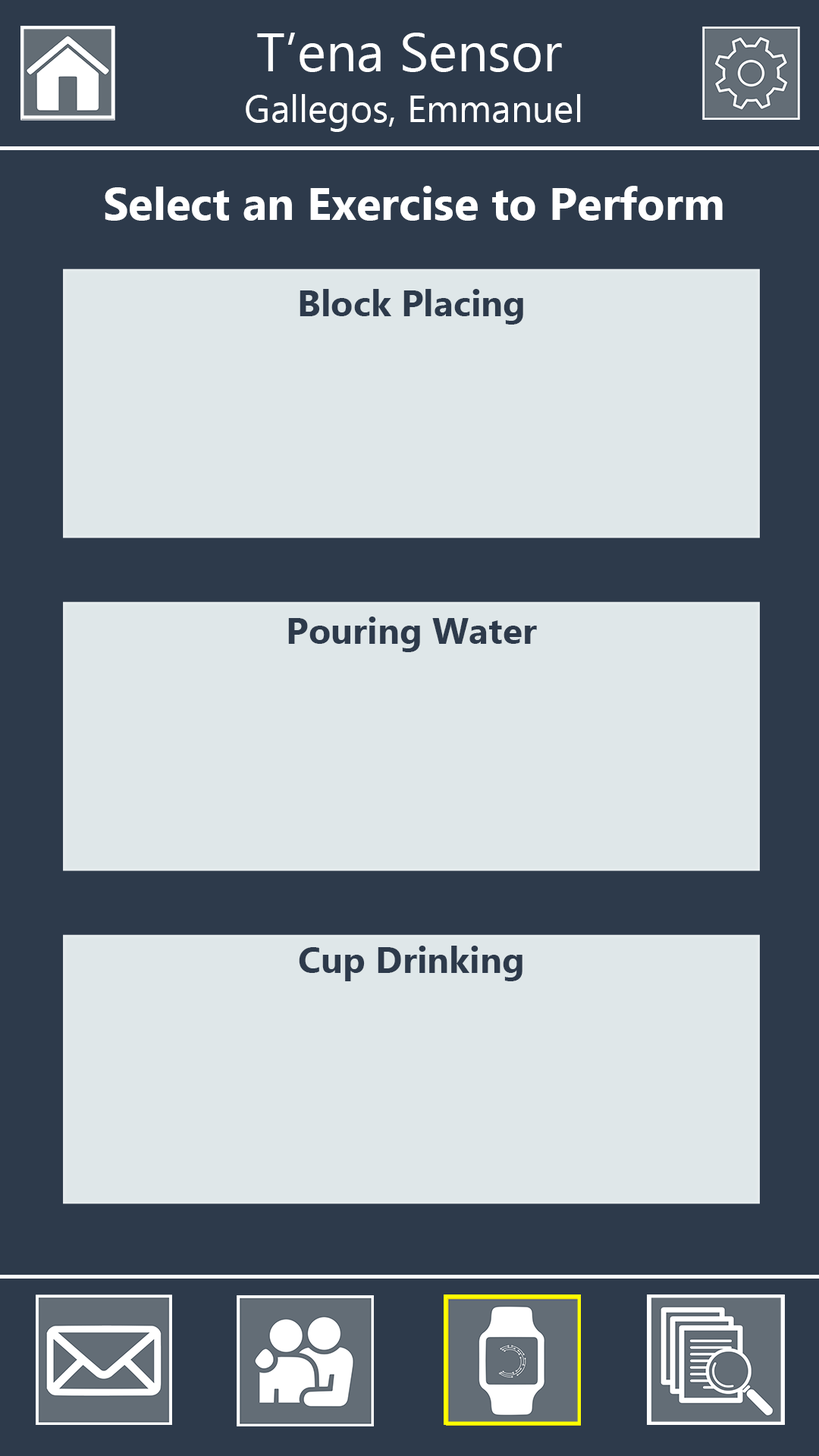
<style>
.page{position:relative;width:819px;height:1456px;background:#dfe7e9}
.page>*{position:absolute;margin:0}
.t1{font:54.6px "Ebrima";color:#ffffff}
.t2{font:37.9px "Ebrima";color:#ffffff}
.t3{font:45.5px "Ebrima-Bold";color:#ffffff}
.t4{font:36.4px "Ebrima-Bold";color:#2d3a4b}
</style>
<div class="page">
<p class="t1" style="left:257px;top:33px;width:305px;height:39px">T’ena Sensor</p>
<p class="t2" style="left:246px;top:94px;width:335px;height:38px">Gallegos, Emmanuel</p>
<p class="t3" style="left:105px;top:186px;width:618px;height:35px">Select an Exercise to Perform</p>
<p class="t4" style="left:300px;top:289px;width:223px;height:36px">Block Placing</p>
<p class="t4" style="left:288px;top:617px;width:249px;height:35px">Pouring Water</p>
<p class="t4" style="left:299px;top:946px;width:223px;height:35px">Cup Drinking</p>
</div>
